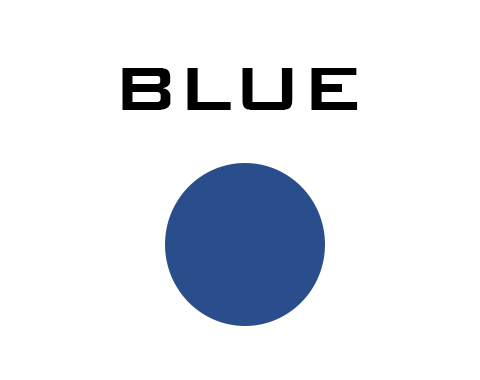
<style>
.page{position:relative;width:480px;height:380px;background:#ffffff}
.page>*{position:absolute;margin:0}
.t1{font:99.6px "BankGothicBT-Medium";color:#000000}
</style>
<div class="page">
<p class="t1" style="left:122px;top:68px;width:236px;height:42px">blue</p>
</div>
